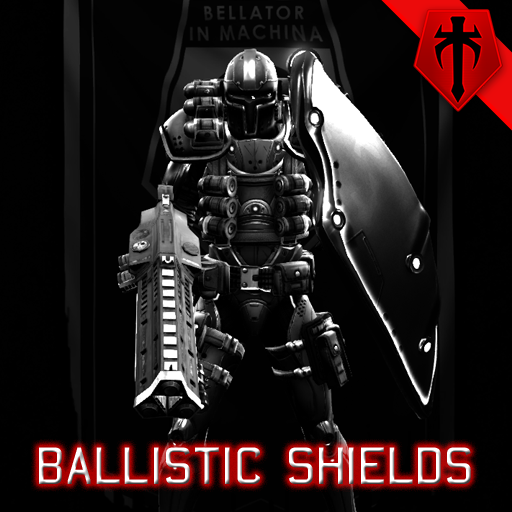
<style>
.page{position:relative;width:512px;height:512px;background:#010101}
.page>*{position:absolute;margin:0}
.t1{font:48px "AF-Carplates-Medium"}
</style>
<div class="page">
<p class="t1" style="left:39px;top:447px;width:432px;height:37px">BALLISTIC SHIELDS</p>
</div>
